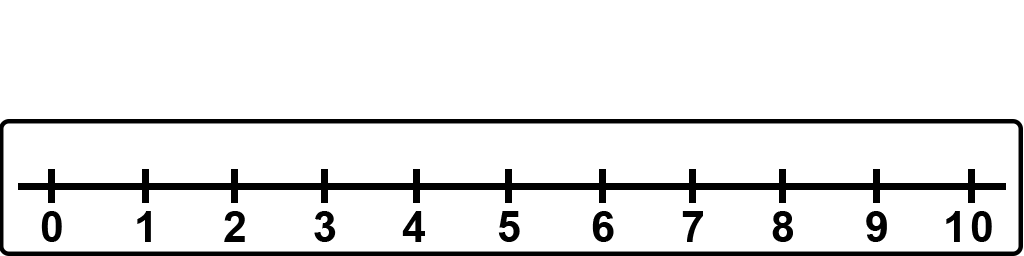
<style>
.page{position:relative;width:1024px;height:256px;background:#ffffff}
.page>*{position:absolute;margin:0}
.t1{font:42.7px "Arial-BoldMT";letter-spacing:0.075em;color:#000000}
</style>
<div class="page">
<p class="t1" style="left:41px;top:211px;width:21px;height:31px">0</p>
<p class="t1" style="left:137px;top:211px;width:14px;height:31px">1</p>
<p class="t1" style="left:224px;top:211px;width:21px;height:31px">2</p>
<p class="t1" style="left:314px;top:211px;width:22px;height:31px">3</p>
<p class="t1" style="left:402px;top:211px;width:23px;height:31px">4</p>
<p class="t1" style="left:498px;top:211px;width:22px;height:31px">5</p>
<p class="t1" style="left:592px;top:211px;width:22px;height:31px">6</p>
<p class="t1" style="left:682px;top:211px;width:21px;height:31px">7</p>
<p class="t1" style="left:772px;top:211px;width:21px;height:31px">8</p>
<p class="t1" style="left:866px;top:211px;width:21px;height:31px">9</p>
<p class="t1" style="left:946px;top:211px;width:46px;height:31px">10</p>
</div>
